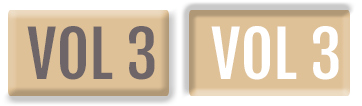
<style>
.page{position:relative;width:362px;height:106px;background:#dfc197}
.page>*{position:absolute;margin:0}
.t1{font:63px "FjallaOne-Regular";color:#6e6568;text-transform:uppercase}
.t2{font:63px "FjallaOne-Regular";color:#ffffff;text-transform:uppercase}
</style>
<div class="page">
<p class="t1" style="left:27px;top:26px;width:128px;height:54px">VOL 3</p>
<p class="t2" style="left:211px;top:26px;width:128px;height:54px">VOL 3</p>
</div>
